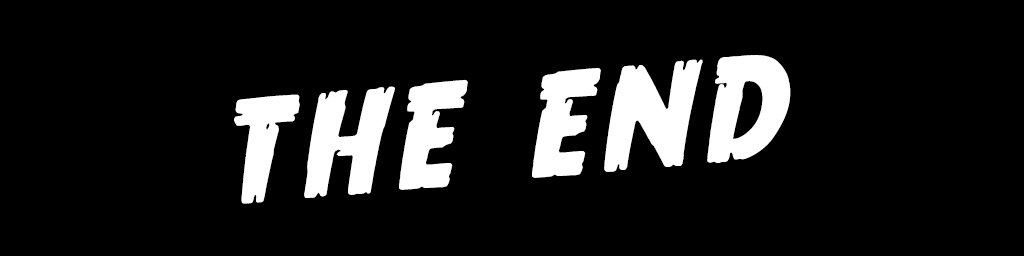
<style>
.page{position:relative;width:1024px;height:256px;background:#000000}
.page>*{position:absolute;margin:0}
.t1{font:150px "TrueCrimes";color:#ffffff}
</style>
<div class="page">
<p class="t1" style="left:234px;top:55px;width:557px;height:149px;rotate:-5deg">THE END</p>
</div>
